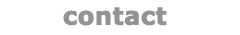
<style>
.page{position:relative;width:240px;height:35px;background:#ffffff}
.page>*{position:absolute;margin:0}
.t1{font:24px "Verdana-Bold";color:#939393;font-weight:bold}
</style>
<div class="page">
<p class="t1" style="left:63px;top:7px;width:104px;height:19px">contact</p>
</div>
